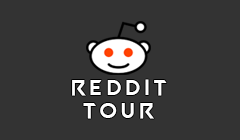
<style>
.page{position:relative;width:240px;height:140px;background:#333333}
.page>*{position:absolute;margin:0}
.t1{font:22.4px "VALORANT-Regular";letter-spacing:0.14em;color:#ffffff}
</style>
<div class="page">
<p class="t1" style="left:72px;top:79px;width:95px;height:17px">REDDIT</p>
<p class="t1" style="left:83px;top:103px;width:71px;height:16px">TOUR</p>
</div>
